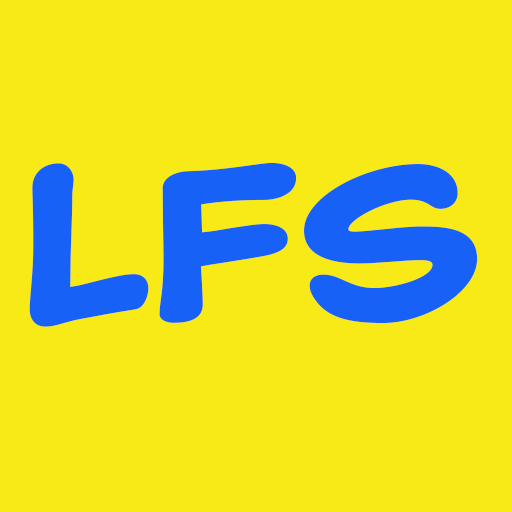
<style>
.page{position:relative;width:512px;height:512px;background:#f7ea17}
.page>*{position:absolute;margin:0}
.t1{font:223.9px "ClassicComic-Bold";color:#1761f7}
</style>
<div class="page">
<p class="t1" style="left:29px;top:162px;width:449px;height:165px">LFS</p>
</div>
